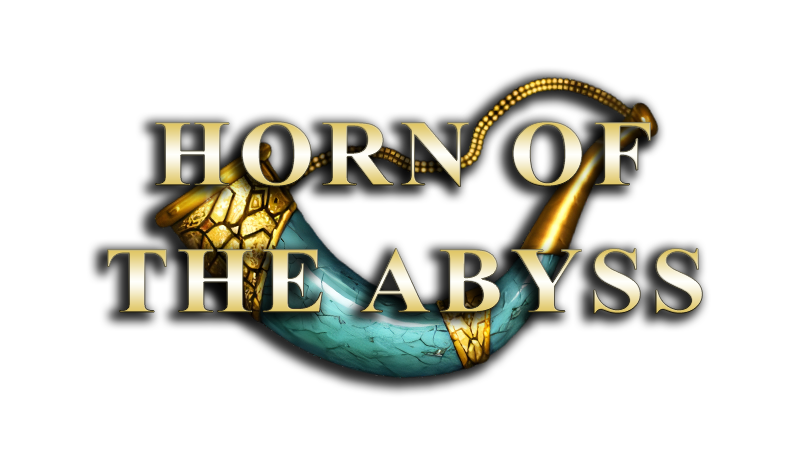
<style>
.page{position:relative;width:800px;height:472px;background:#ffffff}
.page>*{position:absolute;margin:0}
.t1{font:94px "TimesNewRomanPS-BoldMT";letter-spacing:0.07em;scale:1.05 1}
</style>
<div class="page">
<p class="t1" style="left:155px;top:122px;width:496px;height:65px">HORN OF</p>
<p class="t1" style="left:107px;top:248px;width:596px;height:66px">THE ABYSS</p>
</div>
